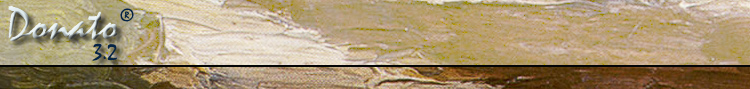
<style>
.page{position:relative;width:750px;height:89px}
.page>*{position:absolute;margin:0}
.t1{font:48px "Mistral"}
.t2{font:18px "Mistral";color:#052345}
.t3{font:24px "Mistral";color:#052345}
</style>
<div class="page">
<p class="t1" style="left:8px;top:6px;width:110px;height:35px">Donato</p>
<p class="t2" style="left:120px;top:8px;width:14px;height:14px">®</p>
<p class="t3" style="left:92px;top:43px;width:25px;height:18px">3.2</p>
</div>
